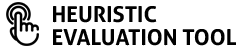
<style>
.page{position:relative;width:240px;height:50px;background:#ffffff}
.page>*{position:absolute;margin:0}
.t1{font:22px "Aller-Bold";color:#000000}
</style>
<div class="page">
<p class="t1" style="left:53px;top:6px;width:104px;height:17px">HEURISTIC</p>
<p class="t1" style="left:53px;top:29px;width:183px;height:17px">EVALUATION TOOL</p>
</div>
